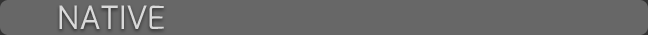
<style>
.page{position:relative;width:648px;height:35px;background:#676767}
.page>*{position:absolute;margin:0}
.t1{font:32px "Exo-Regular";color:#d9d9d9;text-transform:uppercase}
</style>
<div class="page">
<p class="t1" style="left:59px;top:5px;width:105px;height:24px">native</p>
</div>
